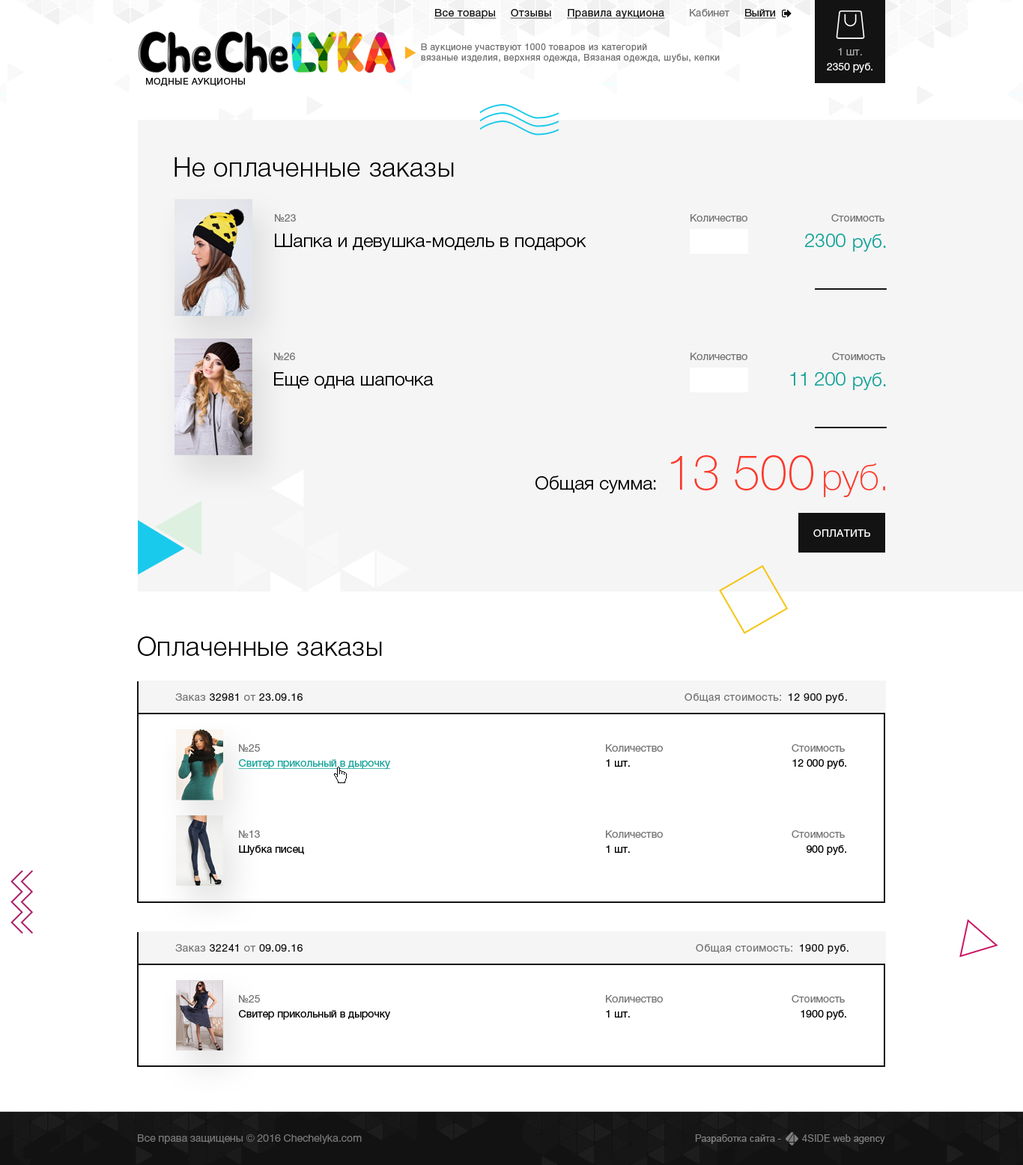
<style>
.page{position:relative;width:1023px;height:1165px;background:#ffffff}
.page>*{position:absolute;margin:0}
.t1{font:10.5px "HelveticaNeueCyr-Roman";letter-spacing:0.04em;color:#131313;text-decoration:underline}
.t2{font:10.5px "HelveticaNeueCyr-Roman";color:#767575}
.t3{font:10.5px "HelveticaNeueCyr-Roman";color:#131313;text-decoration:underline}
.t4{font:9px "HelveticaNeueCyr-Roman";letter-spacing:0.04em;color:#767575}
.t5{font:10.5px/15px "HelveticaNeueCyr-Roman";color:#ffffff}
.t6{font:10.5px/15px "HelveticaNeueCyr-Roman";color:#aeadad}
.t7{font:9px "HelveticaNeueCyr-Roman";letter-spacing:0.04em;color:#131313;text-transform:uppercase}
.t8{font:26.2px "HelveticaNeueCyr-Light";letter-spacing:0.02em;color:#000000}
.t9{font:10.5px "HelveticaNeueCyr-Roman";color:#767676}
.t10{font:18.7px "HelveticaNeueCyr-Light";color:#000000}
.t11{font:18.7px "HelveticaNeueCyr-Light";color:#15a399}
.t12{font:48.7px "HelveticaNeueCyr-Thin";color:#fc392c}
.t13{font:37.5px "HelveticaNeueCyr-Thin";color:#fc392c}
.t14{font:10.5px "HelveticaNeueCyr-Roman";letter-spacing:0.02em;color:#ffffff;text-transform:uppercase}
.t15{font:10.5px "HelveticaNeueCyr-Roman";letter-spacing:0.04em;color:#131313}
.t16{font:10.5px "HelveticaNeueCyr-Roman";letter-spacing:0.04em;color:#767676}
.t17{font:10.5px "HelveticaNeueCyr-Roman";color:#15a399;text-decoration:underline}
.t18{font:10.5px "HelveticaNeueCyr-Roman";color:#000000}
</style>
<div class="page">
<p class="t1" style="left:434px;top:9px;width:63px;height:10px">Все товары</p>
<p class="t1" style="left:510px;top:9px;width:42px;height:10px">Отзывы</p>
<p class="t1" style="left:567px;top:9px;width:98px;height:10px">Правила аукциона</p>
<p class="t2" style="left:690px;top:9px;width:40px;height:7px">Кабинет</p>
<p class="t3" style="left:745px;top:9px;width:31px;height:10px">Выйти</p>
<p class="t4" style="left:421px;top:43px;width:299px;height:19px">В аукционе участвуют 1000 товаров из категорий <br>вязаные изделия, верхняя одежда, Вязаная одежда, шубы, кепки</p>
<p class="t5" style="left:827px;top:48px;width:46px;height:25px;text-align:center"><span class="t6">1 шт.<br></span>2350 руб.</p>
<p class="t7" style="left:146px;top:78px;width:99px;height:8px">Модные аукционы</p>
<p class="t8" style="left:175px;top:157px;width:279px;height:20px">Не оплаченные заказы</p>
<p class="t9" style="left:275px;top:214px;width:21px;height:8px">№23</p>
<p class="t9" style="left:691px;top:214px;width:57px;height:8px">Количество</p>
<p class="t9" style="left:831px;top:214px;width:54px;height:8px">Стоимость</p>
<p class="t10" style="left:275px;top:234px;width:311px;height:17px">Шапка и девушка-модель в подарок</p>
<p class="t11" style="left:805px;top:234px;width:41px;height:13px">2300</p>
<p class="t11" style="left:853px;top:234px;width:33px;height:18px">руб.</p>
<p class="t9" style="left:274px;top:353px;width:21px;height:7px">№26</p>
<p class="t9" style="left:691px;top:353px;width:57px;height:8px">Количество</p>
<p class="t9" style="left:832px;top:353px;width:53px;height:7px">Стоимость</p>
<p class="t10" style="left:274px;top:372px;width:160px;height:17px">Еще одна шапочка</p>
<p class="t11" style="left:790px;top:372px;width:56px;height:14px">11 200</p>
<p class="t11" style="left:853px;top:372px;width:33px;height:18px">руб.</p>
<p class="t12" style="left:671px;top:455px;width:142px;height:36px">13 500</p>
<p class="t13" style="left:824px;top:464px;width:61px;height:33px">руб.</p>
<p class="t10" style="left:536px;top:476px;width:120px;height:18px">Общая сумма:</p>
<p class="t14" style="left:813px;top:530px;width:57px;height:8px">Оплатить</p>
<p class="t8" style="left:138px;top:637px;width:244px;height:19px">Оплаченные заказы</p>
<p class="t15" style="left:175px;top:694px;width:128px;height:7px"><span class="t16">Заказ</span> 32981 <span class="t16">от</span> 23.09.16</p>
<p class="t16" style="left:685px;top:694px;width:96px;height:9px">Общая стоимость:</p>
<p class="t15" style="left:789px;top:694px;width:58px;height:9px">12 900 руб.</p>
<p class="t9" style="left:239px;top:745px;width:21px;height:7px">№25</p>
<p class="t9" style="left:606px;top:745px;width:57px;height:8px">Количество</p>
<p class="t9" style="left:792px;top:745px;width:53px;height:7px">Стоимость</p>
<p class="t17" style="left:238px;top:759px;width:152px;height:10px">Свитер прикольный в дырочку</p>
<p class="t18" style="left:606px;top:759px;width:24px;height:8px">1 шт.</p>
<p class="t18" style="left:792px;top:759px;width:54px;height:10px">12 000 руб.</p>
<p class="t9" style="left:239px;top:831px;width:21px;height:7px">№13</p>
<p class="t9" style="left:606px;top:831px;width:57px;height:8px">Количество</p>
<p class="t9" style="left:792px;top:831px;width:53px;height:7px">Стоимость</p>
<p class="t18" style="left:239px;top:846px;width:65px;height:9px">Шубка писец</p>
<p class="t18" style="left:606px;top:846px;width:24px;height:7px">1 шт.</p>
<p class="t18" style="left:807px;top:846px;width:39px;height:9px">900 руб.</p>
<p class="t15" style="left:175px;top:944px;width:128px;height:8px"><span class="t16">Заказ</span> 32241 <span class="t16">от</span> 09.09.16</p>
<p class="t16" style="left:696px;top:944px;width:96px;height:9px">Общая стоимость:</p>
<p class="t15" style="left:800px;top:944px;width:49px;height:10px">1900 руб.</p>
<p class="t9" style="left:239px;top:995px;width:21px;height:8px">№25</p>
<p class="t9" style="left:606px;top:995px;width:57px;height:9px">Количество</p>
<p class="t9" style="left:792px;top:995px;width:53px;height:8px">Стоимость</p>
<p class="t18" style="left:239px;top:1010px;width:151px;height:10px">Свитер прикольный в дырочку</p>
<p class="t18" style="left:606px;top:1010px;width:24px;height:8px">1 шт.</p>
<p class="t18" style="left:801px;top:1010px;width:45px;height:10px">1900 руб.</p>
<p class="t9" style="left:138px;top:1135px;width:224px;height:9px">Все права защищены © 2016 Chechelyka.com</p>
</div>
